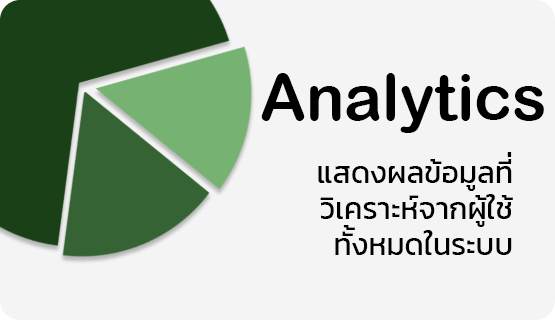
<style>
.page{position:relative;width:555px;height:320px;background:#f4f4f4}
.page>*{position:absolute;margin:0}
.t1{font:64px "ArialRoundedMTBold";color:#000000}
.t2{font:30px "Kanit-Regular";color:#000000}
</style>
<div class="page">
<p class="t1" style="left:261px;top:73px;width:283px;height:60px">Analytics</p>
<p class="t2" style="left:318px;top:159px;width:195px;height:96px;text-align:right">แสดงผลข้อมูลที<br>วิเคราะห์จากผู้ใช้<br>ทังหมดในระบบ</p>
<p class="t2" style="left:507px;top:152px;width:5px;height:5px">่</p>
<p class="t2" style="left:343px;top:225px;width:12px;height:5px">้</p>
</div>
